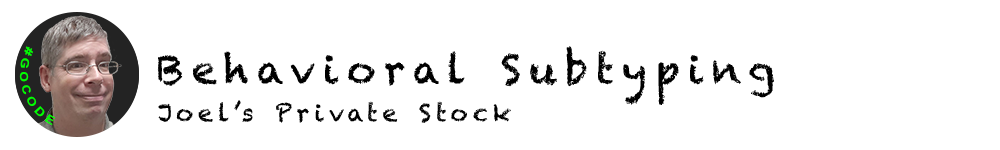
<style>
.page{position:relative;width:1000px;height:150px;background:#ffffff}
.page>*{position:absolute;margin:0}
.t1{font:11.2px "Arial-BoldMT";letter-spacing:0.2em;color:#00ff00}
.t2{font:40px "Chalkduster";letter-spacing:0.2em;color:#000000}
.t3{font:24px "Chalkduster";letter-spacing:0.2em;color:#000000}
</style>
<div class="page">
<p class="t1" style="left:19px;top:46px;width:37px;height:80px;rotate:72deg">#GOCODE</p>
<p class="t2" style="left:157px;top:46px;width:617px;height:59px">Behavioral Subtyping</p>
<p class="t3" style="left:158px;top:100px;width:353px;height:23px">Joel’s Private Stock</p>
</div>
